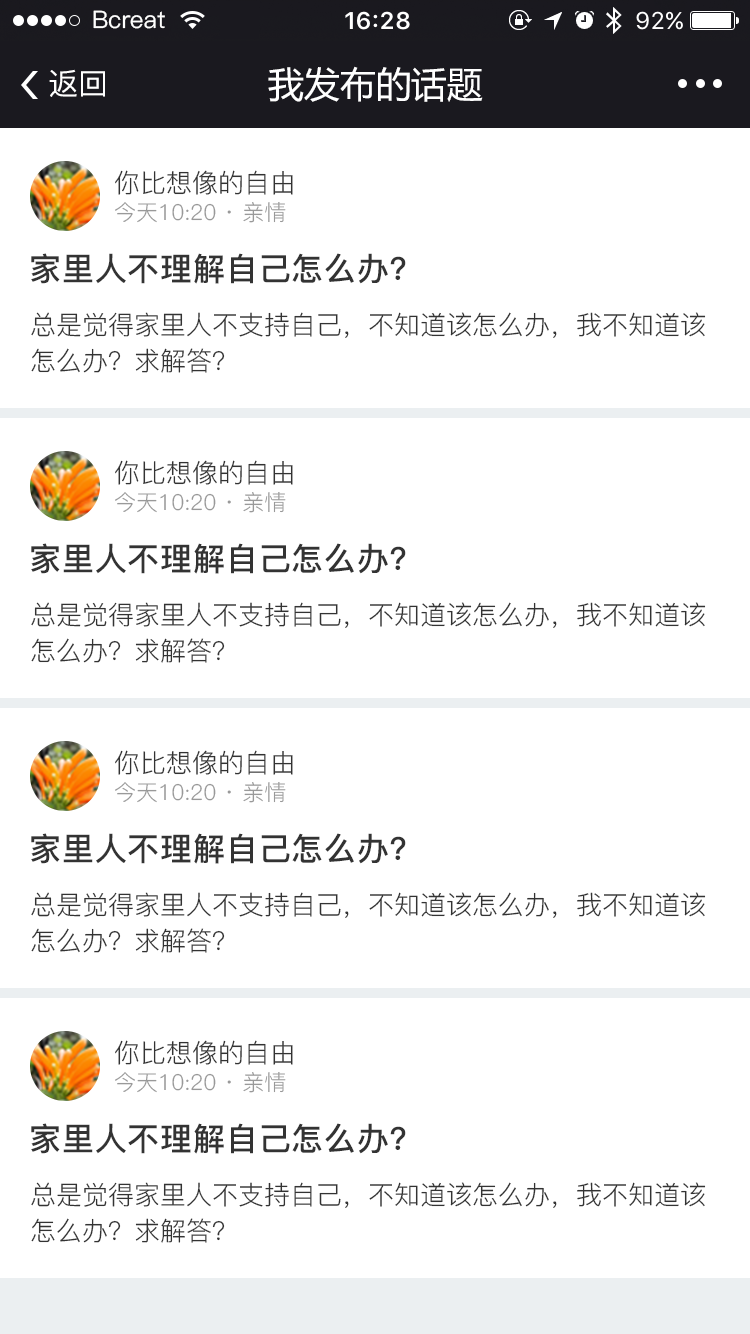
<style>
.page{position:relative;width:750px;height:1334px;background:#ffffff}
.page>*{position:absolute;margin:0}
.t1{font:24px "PingFang-SC-Medium";color:#ffffff}
.t2{font:30px "PingFang-SC-Medium";color:#ffffff}
.t3{font:36px "MicrosoftYaHei";color:#ffffff}
.t4{font:26px "PingFang-SC-Regular";color:#333333}
.t5{font:22px "PingFang-SC-Regular";color:#999999}
.t6{font:32px "PingFang-SC-Bold";letter-spacing:0.025em;color:#333333}
.t7{font:26px/36px "PingFang-SC-Regular";color:#333333}
</style>
<div class="page">
<p class="t1" style="left:93px;top:10px;width:72px;height:19px">Bcreat</p>
<p class="t2" style="left:49px;top:69px;width:56px;height:28px">返回</p>
<p class="t3" style="left:268px;top:66px;width:215px;height:36px">我发布的话题</p>
<p class="t4" style="left:115px;top:170px;width:178px;height:25px">你比想像的自由</p>
<p class="t5" style="left:115px;top:202px;width:171px;height:21px">今天10:20 · 亲情</p>
<p class="t6" style="left:31px;top:253px;width:375px;height:31px">家里人不理解自己怎么办？</p>
<p class="t7" style="left:31px;top:312px;width:675px;height:61px">总是觉得家里人不支持自己，不知道该怎么办，我不知道该怎么办？求解答？</p>
<p class="t4" style="left:115px;top:460px;width:178px;height:25px">你比想像的自由</p>
<p class="t5" style="left:115px;top:492px;width:171px;height:21px">今天10:20 · 亲情</p>
<p class="t6" style="left:31px;top:543px;width:375px;height:31px">家里人不理解自己怎么办？</p>
<p class="t7" style="left:31px;top:602px;width:675px;height:61px">总是觉得家里人不支持自己，不知道该怎么办，我不知道该怎么办？求解答？</p>
<p class="t4" style="left:115px;top:750px;width:178px;height:25px">你比想像的自由</p>
<p class="t5" style="left:115px;top:782px;width:171px;height:21px">今天10:20 · 亲情</p>
<p class="t6" style="left:31px;top:833px;width:375px;height:31px">家里人不理解自己怎么办？</p>
<p class="t7" style="left:31px;top:892px;width:675px;height:61px">总是觉得家里人不支持自己，不知道该怎么办，我不知道该怎么办？求解答？</p>
<p class="t4" style="left:115px;top:1040px;width:178px;height:25px">你比想像的自由</p>
<p class="t5" style="left:115px;top:1072px;width:171px;height:21px">今天10:20 · 亲情</p>
<p class="t6" style="left:31px;top:1123px;width:375px;height:31px">家里人不理解自己怎么办？</p>
<p class="t7" style="left:31px;top:1182px;width:675px;height:61px">总是觉得家里人不支持自己，不知道该怎么办，我不知道该怎么办？求解答？</p>
</div>
